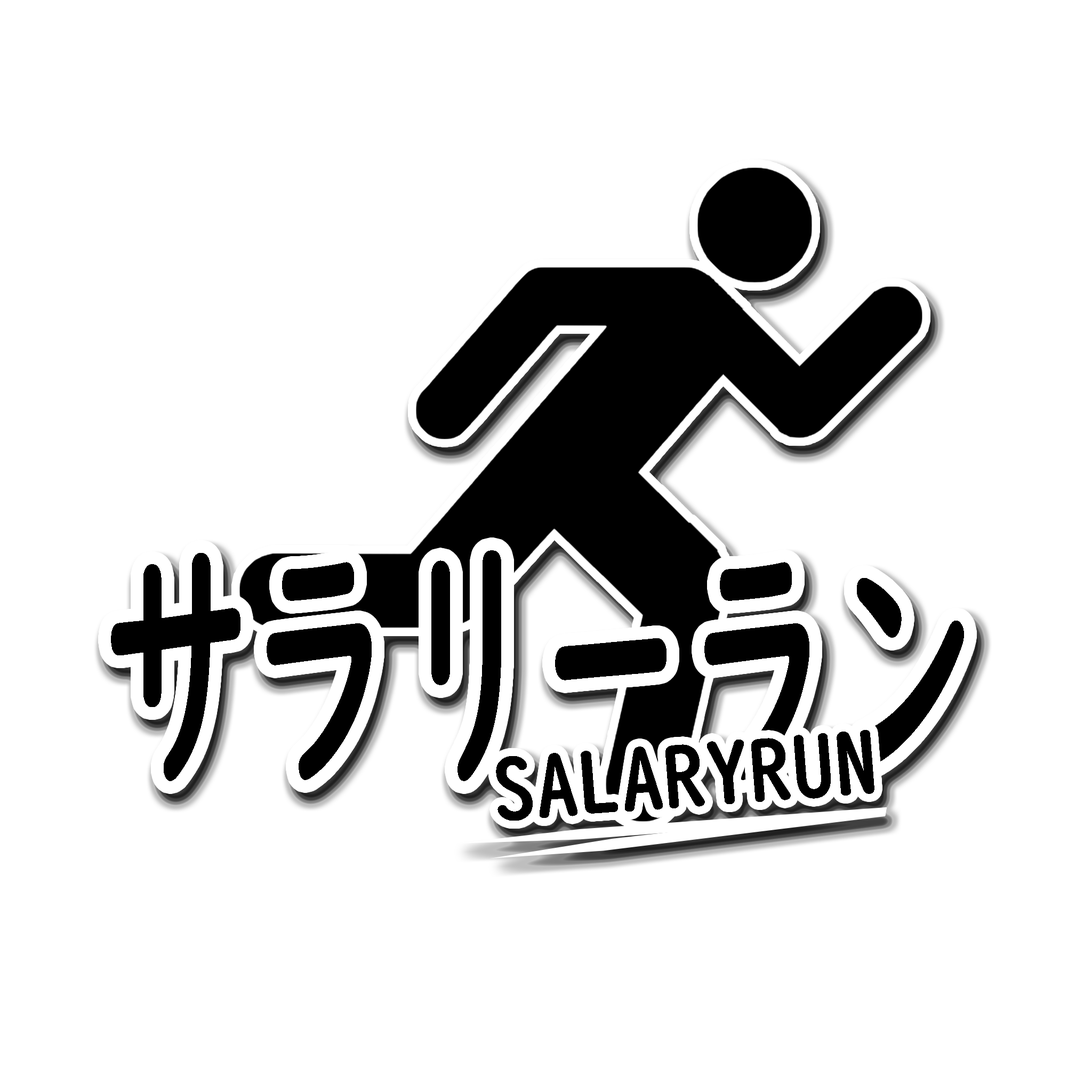
<style>
.page{position:relative;width:1092px;height:1092px;background:#ffffff}
.page>*{position:absolute;margin:0}
.t1{font:272.8px "UDDigiKyokashoN-B";color:#000000;scale:0.53 1}
.t2{font:85.1px "UDDigiKyokashoN-B";color:#000000}
</style>
<div class="page">
<p class="t1" style="left:111px;top:550px;width:853px;height:231px">サラリーラン</p>
<p class="t2" style="left:496px;top:730px;width:378px;height:91px;rotate:-4deg">SALARYRUN</p>
</div>
